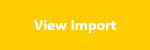
<style>
.page{position:relative;width:150px;height:50px;background:#ffcc00}
.page>*{position:absolute;margin:0}
.t1{font:16px "Calibri-Bold";color:#ffffff}
</style>
<div class="page">
<p class="t1" style="left:33px;top:20px;width:83px;height:13px">View Import</p>
</div>
